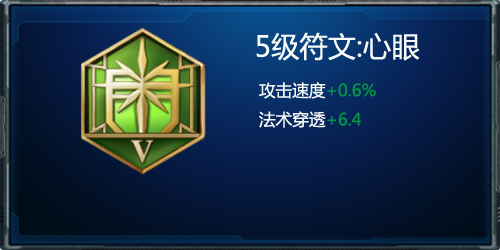
<style>
.page{position:relative;width:500px;height:250px}
.page>*{position:absolute;margin:0}
.t1{font:28.3px "MicrosoftYaHei";color:#f7faf8}
.t2{font:16.7px "MicrosoftYaHei";color:#f7faf8}
.t3{font:16.7px "MicrosoftYaHei";color:#009944}
</style>
<div class="page">
<p class="t1" style="left:256px;top:32px;width:164px;height:96px;text-align:center">5级符文:心眼<br><span class="t2">  攻击速度</span><span class="t3">+0.6%<br></span><span class="t2">  法术穿透</span><span class="t3">+6.4</span></p>
</div>
